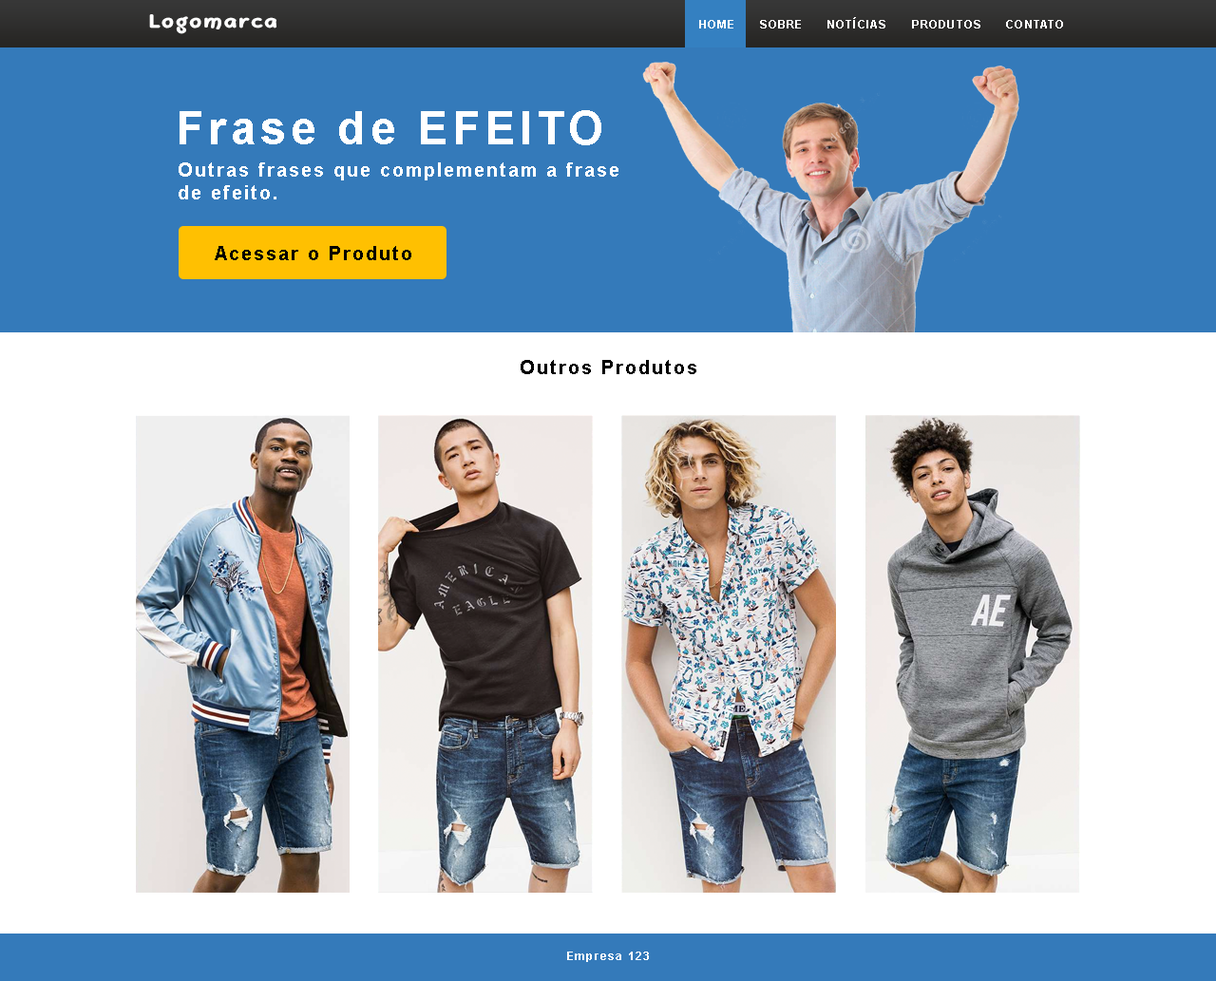
<style>
.page{position:relative;width:1216px;height:981px;background:#347aba}
.page>*{position:absolute;margin:0}
.t1{font:18px "DeFonarts-Bold";letter-spacing:0.1em;color:#ffffff}
.t2{font:11.4px "Arial-BoldMT";letter-spacing:0.1em;color:#ffffff}
.t3{font:45.6px "Arial-BoldMT";letter-spacing:0.1em;color:#ffffff}
.t4{font:19px "Arial-BoldMT";letter-spacing:0.1em;color:#ffffff}
.t5{font:19px "Arial-BoldMT";letter-spacing:0.1em;color:#000000}
</style>
<div class="page">
<p class="t1" style="left:149px;top:14px;width:127px;height:20px">Logomarca</p>
<p class="t2" style="left:699px;top:17px;width:364px;height:11px">HOME      SOBRE      NOTÍCIAS      PRODUTOS      CONTATO</p>
<p class="t3" style="left:179px;top:110px;width:422px;height:35px">Frase de EFEITO</p>
<p class="t4" style="left:179px;top:162px;width:439px;height:37px">Outras frases que complementam a frase<br>de efeito.</p>
<p class="t5" style="left:215px;top:246px;width:196px;height:14px">Acessar o Produto</p>
<p class="t5" style="left:520px;top:360px;width:176px;height:14px">Outros Produtos</p>
<p class="t2" style="left:567px;top:952px;width:82px;height:10px">Empresa 123</p>
</div>
